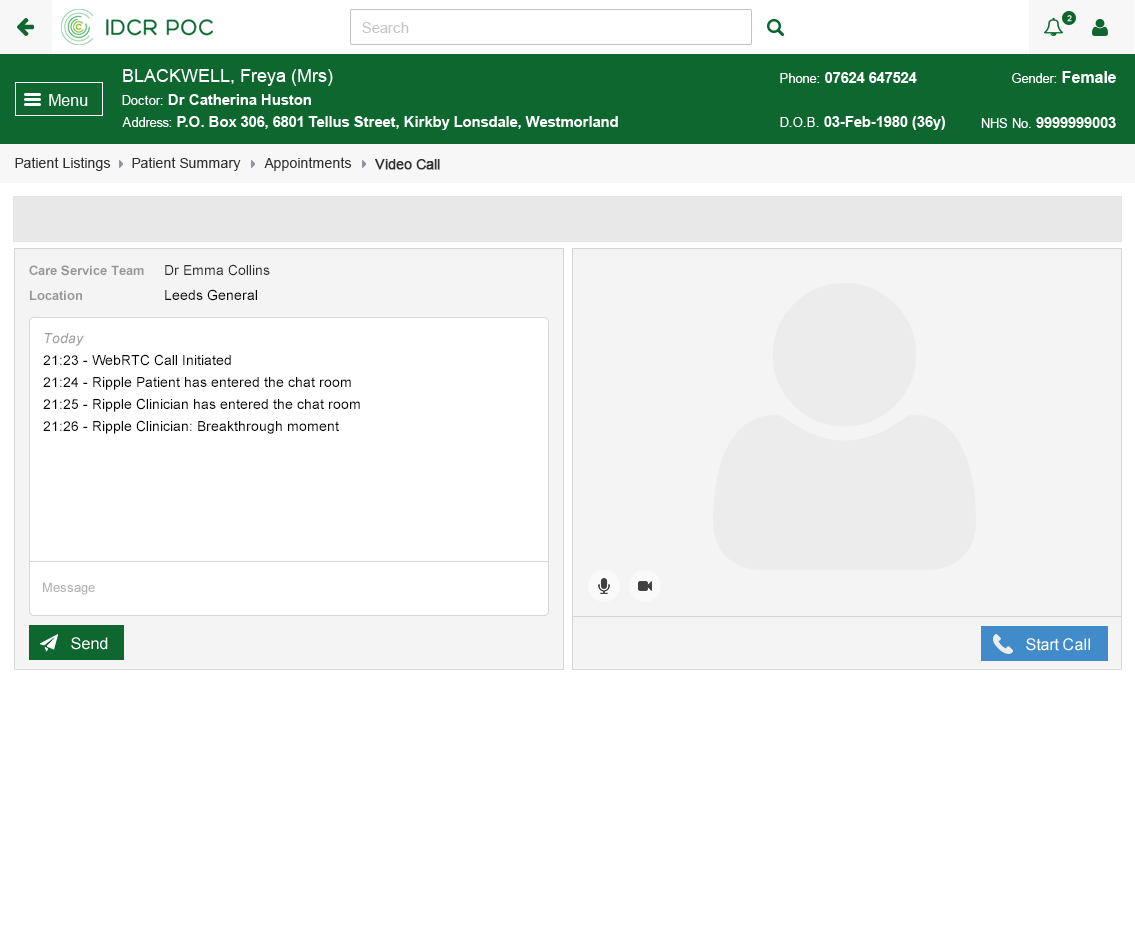
<style>
.page{position:relative;width:1135px;height:946px;background:#ffffff}
.page>*{position:absolute;margin:0}
.t1{font:14px "ArialMT";color:#313131}
.t2{font:14px "ArialMT";color:#313131;font-weight:bold}
.t3{font:13px "Arial-BoldMT";color:#959595}
.t4{font:14px "ArialMT";color:#303030}
.t5{font:14px "ArialMT";color:#000000}
.t6{font:14px/22px "ArialMT";color:#000000}
.t7{font:14px/22px "Arial-ItalicMT";color:#9d9d9d}
.t8{font:13px "ArialMT";color:#afafaf}
</style>
<div class="page">
<p class="t1" style="left:15px;top:157px;width:96px;height:14px">Patient Listings</p>
<p class="t1" style="left:132px;top:157px;width:109px;height:14px">Patient Summary</p>
<p class="t1" style="left:264px;top:157px;width:88px;height:14px">Appointments</p>
<p class="t2" style="left:375px;top:159px;width:65px;height:11px">Video Call</p>
<p class="t3" style="left:29px;top:265px;width:115px;height:11px">Care Service Team</p>
<p class="t4" style="left:165px;top:264px;width:105px;height:12px">Dr Emma Collins</p>
<p class="t3" style="left:30px;top:290px;width:52px;height:10px">Location</p>
<p class="t5" style="left:165px;top:289px;width:92px;height:12px">Leeds General</p>
<p class="t6" style="left:43px;top:333px;width:317px;height:101px"><span class="t7">Today<br></span>21:23 - WebRTC Call Initiated<br>21:24 - Ripple Patient has entered the chat room<br>21:25 - Ripple Clinician has entered the chat room<br>21:26 - Ripple Clinician: Breakthrough moment</p>
<p class="t8" style="left:43px;top:582px;width:52px;height:13px">Message</p>
</div>
